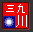
<style>
.page{position:relative;width:33px;height:32px;background:#f20000}
.page>*{position:absolute;margin:0}
.t1{font:10.4px "SimSun";color:#ffffff}
.t2{font:11.7px "SimSun";color:#ffffff}
</style>
<div class="page">
<p class="t1" style="left:6px;top:4px;width:19px;height:9px">三九</p>
<p class="t2" style="left:16px;top:15px;width:11px;height:12px">川</p>
</div>
